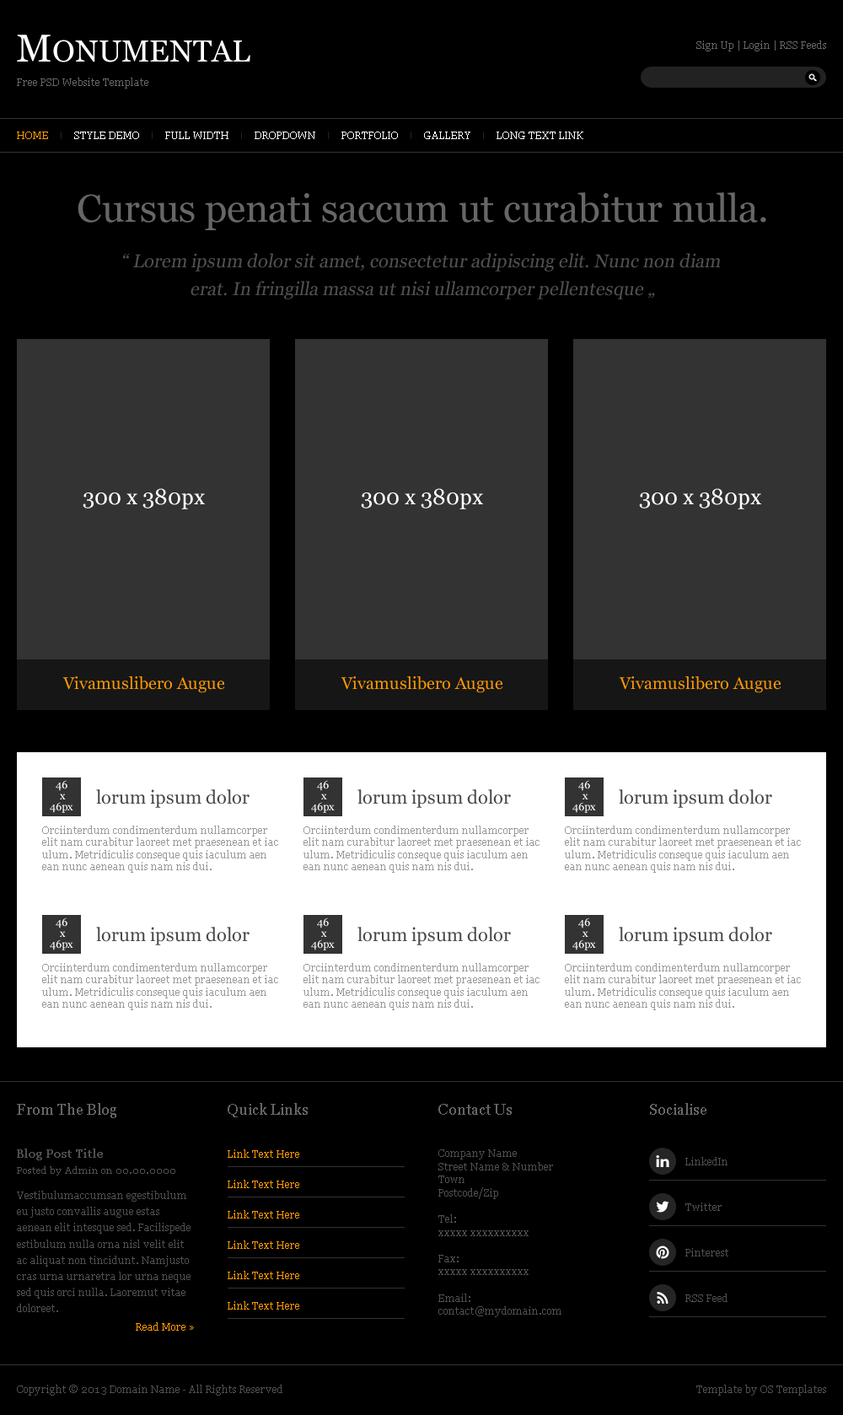
<style>
.page{position:relative;width:843px;height:1415px;background:#000000}
.page>*{position:absolute;margin:0}
.t1{font:30.3px "Georgia";color:#ffffff}
.t2{font:38.8px "Georgia";color:#ffffff}
.t3{font:10.1px "Georgia";color:#666666}
.t4{font:10.1px "Georgia";color:#ff9900}
.t5{font:10.1px "Georgia";color:#ffffff}
.t6{font:38.8px "Georgia";color:#666666}
.t7{font:18.5px/27.8px "Georgia";color:#505050;font-style:italic}
.t8{font:18.5px/18.5px "Georgia";color:#505050;font-style:italic}
.t9{font:21.9px "Georgia";color:#ffffff}
.t10{font:16.9px "Georgia";color:#ff9900}
.t11{font:11px/11px "Georgia";color:#ffffff}
.t12{font:18.5px "Georgia";color:#4a4a4a}
.t13{font:10.1px/12.1px "Georgia";color:#999999}
.t14{font:15.2px "Georgia";color:#666666}
.t15{font:11px "Georgia";color:#505050;font-weight:bold}
.t16{font:10.1px/13.2px "Georgia";color:#505050}
.t17{font:10.1px "Georgia";color:#505050}
.t18{font:9.3px "Georgia";color:#505050}
.t19{font:10.1px/16.2px "Georgia";color:#505050}
</style>
<div class="page">
<p class="t1" style="left:17px;top:35px;width:233px;height:27px"><span class="t2">M</span>ONUMENTAL</p>
<p class="t3" style="left:696px;top:40px;width:130px;height:11px">Sign Up | Login | RSS Feeds</p>
<p class="t3" style="left:17px;top:78px;width:131px;height:11px">Free PSD Website Template</p>
<p class="t4" style="left:17px;top:132px;width:31px;height:7px">HOME</p>
<p class="t5" style="left:74px;top:132px;width:65px;height:7px">STYLE DEMO</p>
<p class="t5" style="left:165px;top:132px;width:63px;height:7px">FULL WIDTH</p>
<p class="t5" style="left:255px;top:132px;width:60px;height:7px">DROPDOWN</p>
<p class="t5" style="left:341px;top:132px;width:57px;height:7px">PORTFOLIO</p>
<p class="t5" style="left:424px;top:132px;width:46px;height:7px">GALLERY</p>
<p class="t5" style="left:497px;top:132px;width:86px;height:7px">LONG TEXT LINK</p>
<p class="t6" style="left:78px;top:192px;width:688px;height:38px">Cursus penati saccum ut curabitur nulla.</p>
<p class="t7" style="left:123px;top:253px;width:597px;height:46px;text-align:center"><span class="t8">“</span> Lorem ipsum dolor sit amet, consectetur adipiscing elit. Nunc non diam <br>erat. In fringilla massa ut nisi ullamcorper pellentesque „</p>
<p class="t9" style="left:83px;top:488px;width:122px;height:21px">300 x 380px</p>
<p class="t9" style="left:361px;top:488px;width:122px;height:21px">300 x 380px</p>
<p class="t9" style="left:639px;top:488px;width:122px;height:21px">300 x 380px</p>
<p class="t10" style="left:62px;top:676px;width:163px;height:17px">Vivamuslibero Augue</p>
<p class="t10" style="left:341px;top:676px;width:162px;height:17px">Vivamuslibero Augue</p>
<p class="t10" style="left:619px;top:676px;width:162px;height:17px">Vivamuslibero Augue</p>
<p class="t11" style="left:50px;top:780px;width:23px;height:33px;text-align:center">46<br> x<br>46px</p>
<p class="t11" style="left:311px;top:780px;width:24px;height:33px;text-align:center">46<br> x<br>46px</p>
<p class="t11" style="left:572px;top:780px;width:24px;height:33px;text-align:center">46<br> x<br>46px</p>
<p class="t12" style="left:96px;top:789px;width:154px;height:19px">lorum ipsum dolor</p>
<p class="t12" style="left:357px;top:789px;width:154px;height:19px">lorum ipsum dolor</p>
<p class="t12" style="left:619px;top:789px;width:153px;height:19px">lorum ipsum dolor</p>
<p class="t13" style="left:42px;top:825px;width:236px;height:47px">Orciinterdum condimenterdum nullamcorper <br>elit nam curabitur laoreet met praesenean et iac<br>ulum. Metridiculis conseque quis iaculum aen<br>ean nunc aenean quis nam nis dui.</p>
<p class="t13" style="left:303px;top:825px;width:237px;height:47px">Orciinterdum condimenterdum nullamcorper <br>elit nam curabitur laoreet met praesenean et iac<br>ulum. Metridiculis conseque quis iaculum aen<br>ean nunc aenean quis nam nis dui.</p>
<p class="t13" style="left:565px;top:825px;width:236px;height:47px">Orciinterdum condimenterdum nullamcorper <br>elit nam curabitur laoreet met praesenean et iac<br>ulum. Metridiculis conseque quis iaculum aen<br>ean nunc aenean quis nam nis dui.</p>
<p class="t11" style="left:50px;top:917px;width:23px;height:33px;text-align:center">46<br> x<br>46px</p>
<p class="t11" style="left:311px;top:917px;width:24px;height:33px;text-align:center">46<br> x<br>46px</p>
<p class="t11" style="left:572px;top:917px;width:24px;height:33px;text-align:center">46<br> x<br>46px</p>
<p class="t12" style="left:96px;top:926px;width:154px;height:19px">lorum ipsum dolor</p>
<p class="t12" style="left:357px;top:926px;width:154px;height:19px">lorum ipsum dolor</p>
<p class="t12" style="left:619px;top:926px;width:153px;height:19px">lorum ipsum dolor</p>
<p class="t13" style="left:42px;top:963px;width:236px;height:47px">Orciinterdum condimenterdum nullamcorper <br>elit nam curabitur laoreet met praesenean et iac<br>ulum. Metridiculis conseque quis iaculum aen<br>ean nunc aenean quis nam nis dui.</p>
<p class="t13" style="left:303px;top:963px;width:237px;height:47px">Orciinterdum condimenterdum nullamcorper <br>elit nam curabitur laoreet met praesenean et iac<br>ulum. Metridiculis conseque quis iaculum aen<br>ean nunc aenean quis nam nis dui.</p>
<p class="t13" style="left:565px;top:963px;width:236px;height:47px">Orciinterdum condimenterdum nullamcorper <br>elit nam curabitur laoreet met praesenean et iac<br>ulum. Metridiculis conseque quis iaculum aen<br>ean nunc aenean quis nam nis dui.</p>
<p class="t14" style="left:17px;top:1103px;width:99px;height:15px">From The Blog</p>
<p class="t14" style="left:228px;top:1103px;width:80px;height:14px">Quick Links</p>
<p class="t14" style="left:438px;top:1103px;width:74px;height:11px">Contact Us</p>
<p class="t14" style="left:650px;top:1103px;width:56px;height:11px">Socialise</p>
<p class="t15" style="left:17px;top:1148px;width:86px;height:12px">Blog Post Title</p>
<p class="t4" style="left:228px;top:1149px;width:71px;height:8px">Link Text Here</p>
<p class="t16" style="left:438px;top:1149px;width:123px;height:168px">Company Name<br>Street Name &amp; Number<br>Town<br>Postcode/Zip<br><br>Tel:<br>xxxxx xxxxxxxxxx<br><br>Fax:<br>xxxxx xxxxxxxxxx<br><br>Email:<br>contact@mydomain.com</p>
<p class="t17" style="left:685px;top:1157px;width:42px;height:8px">LinkedIn</p>
<p class="t18" style="left:17px;top:1166px;width:158px;height:9px">Posted by Admin on 00.00.0000</p>
<p class="t4" style="left:228px;top:1179px;width:71px;height:9px">Link Text Here</p>
<p class="t19" style="left:17px;top:1190px;width:174px;height:122px">Vestibulumaccumsan egestibulum eu justo convallis augue estas aenean elit intesque sed. Facilispede estibulum nulla orna nisl velit elit ac aliquat non tincidunt. Namjusto cras urna urnaretra lor urna neque sed quis orci nulla. Laoremut vitae doloreet.</p>
<p class="t17" style="left:685px;top:1202px;width:37px;height:9px">Twitter</p>
<p class="t4" style="left:228px;top:1210px;width:71px;height:8px">Link Text Here</p>
<p class="t4" style="left:228px;top:1240px;width:71px;height:8px">Link Text Here</p>
<p class="t17" style="left:685px;top:1248px;width:43px;height:8px">Pinterest</p>
<p class="t4" style="left:228px;top:1270px;width:71px;height:9px">Link Text Here</p>
<p class="t4" style="left:228px;top:1301px;width:71px;height:8px">Link Text Here</p>
<p class="t17" style="left:685px;top:1293px;width:42px;height:9px">RSS Feed</p>
<p class="t4" style="left:136px;top:1322px;width:58px;height:8px">Read More »</p>
<p class="t17" style="left:17px;top:1384px;width:265px;height:11px">Copyright © 2013 Domain Name - All Rights Reserved</p>
<p class="t17" style="left:696px;top:1384px;width:130px;height:11px">Template by OS Templates</p>
</div>
